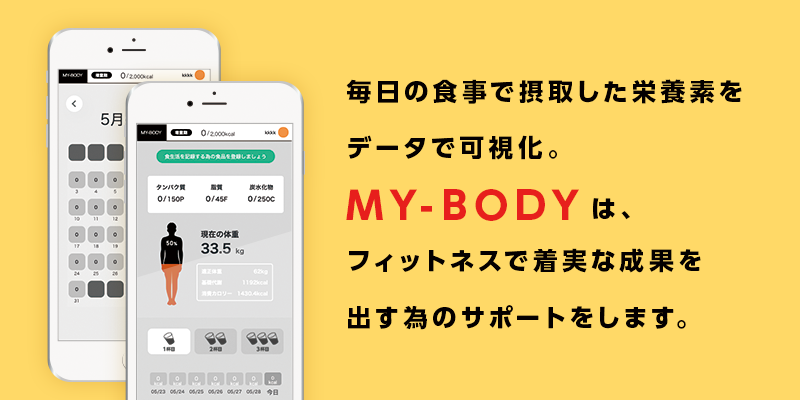
<style>
.page{position:relative;width:800px;height:400px;background:#ffd967}
.page>*{position:absolute;margin:0}
.t1{font:24.7px/56.4px "UDShinGoPro-Bold";letter-spacing:0.2em;color:#040000}
.t2{font:38px/56.4px "UDShinGoPro-Bold";letter-spacing:0.2em;color:#e71f1c}
</style>
<div class="page">
<p class="t1" style="left:346px;top:79px;width:396px;height:251px">毎日の食事で摂取した栄養素を<br>データで可視化。<br><span class="t2">MY-BODY</span>は、<br>フィットネスで着実な成果を<br>出す為のサポートをします。</p>
</div>
